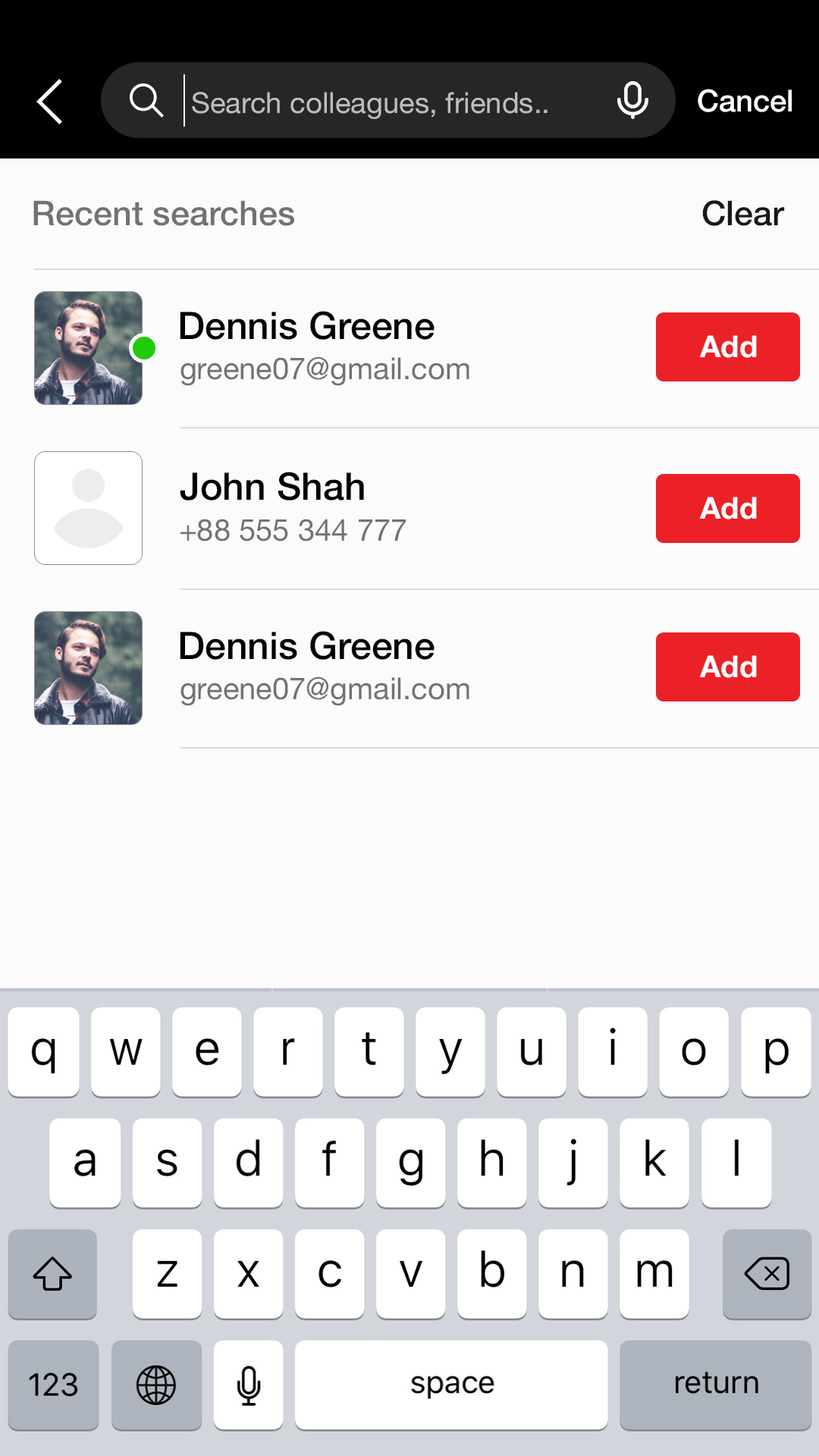
<style>
.page{position:relative;width:819px;height:1456px;background:#fbfbfb}
.page>*{position:absolute;margin:0}
.t1{font:30.4px "HelveticaNeue-Medium";color:#ffffff}
.t2{font:28.8px "HelveticaNeue";color:#bdbdbd}
.t3{font:34.1px "HelveticaNeue-Medium";color:#727272}
.t4{font:34.1px "HelveticaNeue-Medium";color:#181818}
.t5{font:37.9px "HelveticaNeue-Medium";color:#000000}
.t6{font:30.3px "HelveticaNeue-Bold";color:#ffffff}
.t7{font:30.3px "HelveticaNeue";color:#727272}
</style>
<div class="page">
<p class="t1" style="left:698px;top:89px;width:94px;height:23px">Cancel</p>
<p class="t2" style="left:192px;top:92px;width:356px;height:27px">Search colleagues, friends..</p>
<p class="t3" style="left:33px;top:200px;width:261px;height:26px">Recent searches</p>
<p class="t4" style="left:702px;top:200px;width:83px;height:26px">Clear</p>
<p class="t5" style="left:180px;top:311px;width:255px;height:29px">Dennis Greene</p>
<p class="t6" style="left:699px;top:335px;width:58px;height:23px">Add</p>
<p class="t7" style="left:180px;top:356px;width:289px;height:30px">greene07@gmail.com</p>
<p class="t5" style="left:180px;top:472px;width:184px;height:28px">John Shah</p>
<p class="t6" style="left:699px;top:497px;width:58px;height:22px">Add</p>
<p class="t7" style="left:180px;top:519px;width:226px;height:22px">+88 555 344 777</p>
<p class="t5" style="left:180px;top:631px;width:255px;height:29px">Dennis Greene</p>
<p class="t6" style="left:699px;top:655px;width:58px;height:23px">Add</p>
<p class="t7" style="left:180px;top:676px;width:289px;height:30px">greene07@gmail.com</p>
</div>
